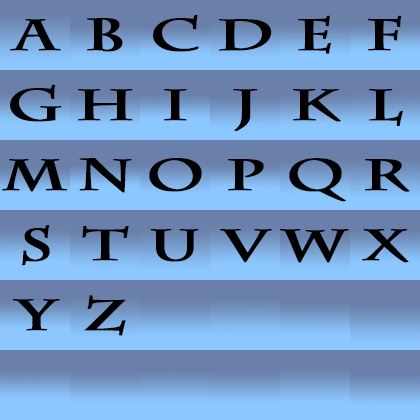
<style>
.page{position:relative;width:420px;height:420px;background:#6a80aa}
.page>*{position:absolute;margin:0}
.t1{font:43.7px "CharlemagneStd-Bold";letter-spacing:1.18em;color:#000000;font-weight:bold;scale:1.38 1}
</style>
<div class="page">
<p class="t1" style="left:153px;top:15px;width:46px;height:37px">C</p>
<p class="t1" style="left:298px;top:15px;width:33px;height:39px">et</p>
<p class="t1" style="left:368px;top:15px;width:34px;height:36px">f</p>
<p class="t1" style="left:10px;top:19px;width:51px;height:32px">A</p>
<p class="t1" style="left:87px;top:18px;width:36px;height:34px">B</p>
<p class="t1" style="left:219px;top:19px;width:53px;height:32px">D</p>
<p class="t1" style="left:10px;top:84px;width:52px;height:38px">g</p>
<p class="t1" style="left:78px;top:89px;width:55px;height:32px">h</p>
<p class="t1" style="left:164px;top:89px;width:23px;height:32px">i</p>
<p class="t1" style="left:233px;top:89px;width:25px;height:42px">j</p>
<p class="t1" style="left:293px;top:89px;width:48px;height:33px">k</p>
<p class="t1" style="left:369px;top:89px;width:34px;height:37px">l</p>
<p class="t1" style="left:2px;top:159px;width:66px;height:33px">m</p>
<p class="t1" style="left:79px;top:158px;width:53px;height:35px">n</p>
<p class="t1" style="left:149px;top:158px;width:53px;height:34px">o</p>
<p class="t1" style="left:228px;top:159px;width:36px;height:32px">p</p>
<p class="t1" style="left:289px;top:158px;width:57px;height:44px">q</p>
<p class="t1" style="left:365px;top:159px;width:45px;height:33px">r</p>
<p class="t1" style="left:22px;top:225px;width:28px;height:41px">s</p>
<p class="t1" style="left:82px;top:226px;width:47px;height:35px">t</p>
<p class="t1" style="left:150px;top:229px;width:49px;height:33px">u</p>
<p class="t1" style="left:220px;top:229px;width:52px;height:34px">v</p>
<p class="t1" style="left:280px;top:229px;width:69px;height:34px">w</p>
<p class="t1" style="left:362px;top:229px;width:47px;height:34px">x</p>
<p class="t1" style="left:13px;top:299px;width:47px;height:32px">y</p>
<p class="t1" style="left:84px;top:295px;width:42px;height:41px">z</p>
</div>
